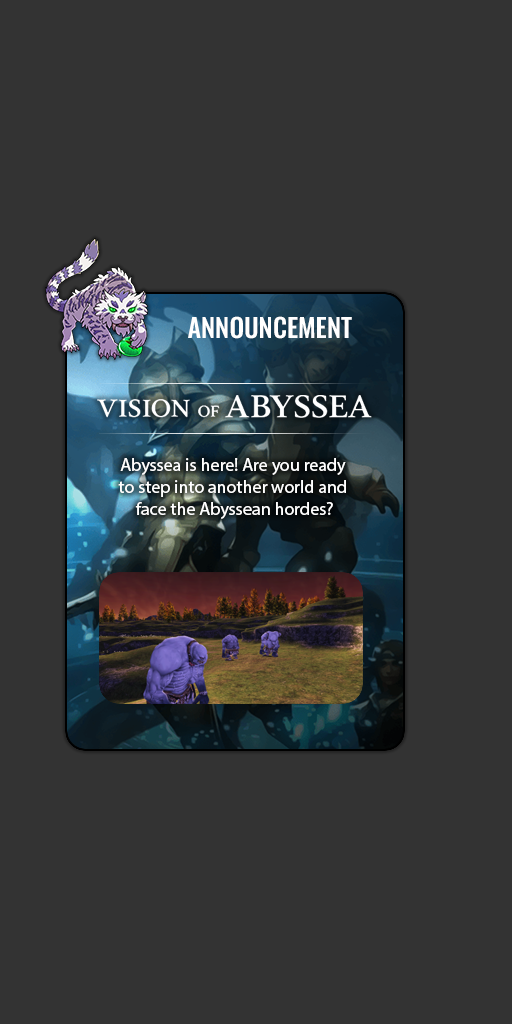
<style>
.page{position:relative;width:512px;height:1024px;background:#333333}
.page>*{position:absolute;margin:0}
.t1{font:26px "Oswald-Medium";color:#ffffff}
.t2{font:18px "MyriadPro-Regular";color:#ffffff}
</style>
<div class="page">
<p class="t1" style="left:188px;top:316px;width:164px;height:23px">ANNOUNCEMENT</p>
<p class="t2" style="left:118px;top:458px;width:228px;height:61px;text-align:center">Abyssea is here! Are you ready <br>to step into another world and <br>face the Abyssean hordes?</p>
</div>
